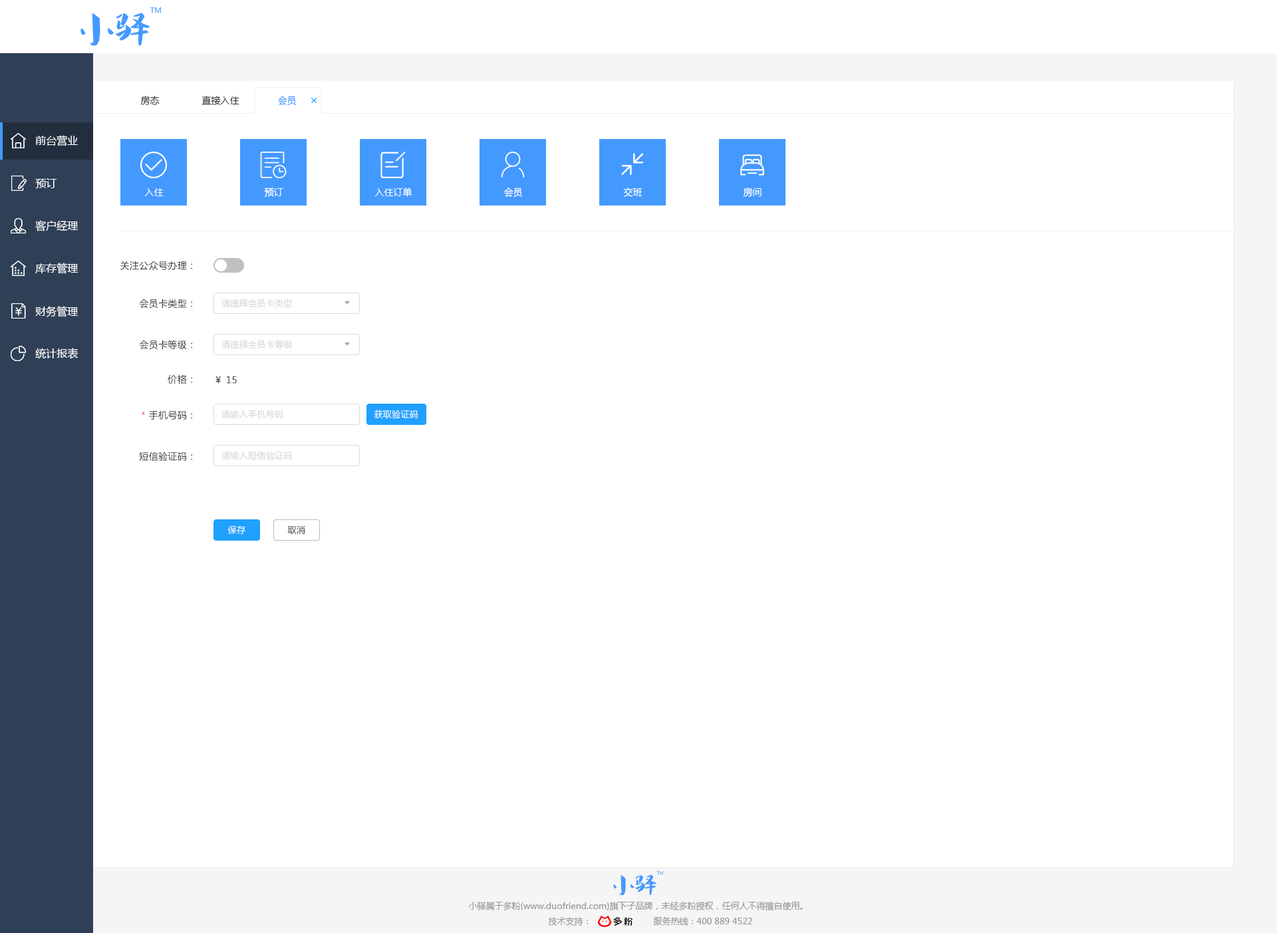
<style>
.page{position:relative;width:1277px;height:933px;background:#ffffff}
.page>*{position:absolute;margin:0}
.t1{font:9.3px "MicrosoftYaHei";color:#333333}
.t2{font:9.3px "MicrosoftYaHei";color:#4499ff}
.t3{font:10.6px "MicrosoftYaHei";color:#ffffff}
.t4{font:9.3px "MicrosoftYaHei";color:#ffffff}
.t5{font:9.3px "MicrosoftYaHei";letter-spacing:0.025em;color:#333333}
.t6{font:8.6px "MicrosoftYaHei";letter-spacing:0.025em;color:#d2d2d2}
.t7{font:9.3px "MicrosoftYaHei";letter-spacing:0.025em;color:#ff4949}
.t8{font:8.6px "MicrosoftYaHei";letter-spacing:0.025em;color:#ffffff}
.t9{font:8.6px "MicrosoftYaHei";letter-spacing:0.025em;color:#333333}
.t10{font:8.6px "MicrosoftYaHei";color:#999999}
</style>
<div class="page">
<p class="t1" style="left:140px;top:96px;width:20px;height:9px">房态</p>
<p class="t1" style="left:202px;top:96px;width:38px;height:9px">直接入住</p>
<p class="t2" style="left:278px;top:96px;width:18px;height:10px">会员</p>
<p class="t3" style="left:35px;top:135px;width:44px;height:11px">前台营业</p>
<p class="t3" style="left:35px;top:178px;width:22px;height:10px">预订</p>
<p class="t4" style="left:144px;top:188px;width:20px;height:8px">入住</p>
<p class="t4" style="left:264px;top:188px;width:19px;height:9px">预订</p>
<p class="t4" style="left:375px;top:188px;width:38px;height:9px">入住订单</p>
<p class="t4" style="left:504px;top:188px;width:18px;height:10px">会员</p>
<p class="t4" style="left:623px;top:188px;width:20px;height:9px">交班</p>
<p class="t4" style="left:743px;top:188px;width:19px;height:9px">房间</p>
<p class="t3" style="left:35px;top:220px;width:44px;height:12px">客户经理</p>
<p class="t3" style="left:35px;top:263px;width:44px;height:11px">库存管理</p>
<p class="t5" style="left:120px;top:261px;width:72px;height:10px">关注公众号办理：</p>
<p class="t5" style="left:139px;top:299px;width:53px;height:10px">会员卡类型：</p>
<p class="t6" style="left:222px;top:299px;width:70px;height:9px">请选择会员卡类型</p>
<p class="t3" style="left:35px;top:306px;width:44px;height:11px">财务管理</p>
<p class="t5" style="left:139px;top:340px;width:53px;height:10px">会员卡等级：</p>
<p class="t6" style="left:222px;top:340px;width:71px;height:9px">请选择会员卡等级</p>
<p class="t3" style="left:35px;top:348px;width:44px;height:11px">统计报表</p>
<p class="t5" style="left:168px;top:375px;width:24px;height:10px">价格：</p>
<p class="t5" style="left:216px;top:376px;width:21px;height:8px">￥ 15</p>
<p class="t5" style="left:142px;top:411px;width:50px;height:9px"><span class="t7">*</span> 手机号码：</p>
<p class="t6" style="left:222px;top:410px;width:61px;height:9px">请输入手机号码</p>
<p class="t8" style="left:374px;top:410px;width:44px;height:9px">获取验证码</p>
<p class="t5" style="left:139px;top:452px;width:53px;height:9px">短信验证码：</p>
<p class="t6" style="left:222px;top:451px;width:70px;height:9px">请输入短信验证码</p>
<p class="t8" style="left:228px;top:526px;width:18px;height:9px">保存</p>
<p class="t9" style="left:287px;top:526px;width:18px;height:9px">取消</p>
<p class="t10" style="left:468px;top:902px;width:335px;height:9px">小驿属于多粉(www.duofriend.com)旗下子品牌，未经多粉授权，任何人不得擅自使用。</p>
<p class="t10" style="left:548px;top:917px;width:40px;height:9px">技术支持：</p>
<p class="t10" style="left:653px;top:917px;width:99px;height:9px">服务热线：400 889 4522</p>
</div>
